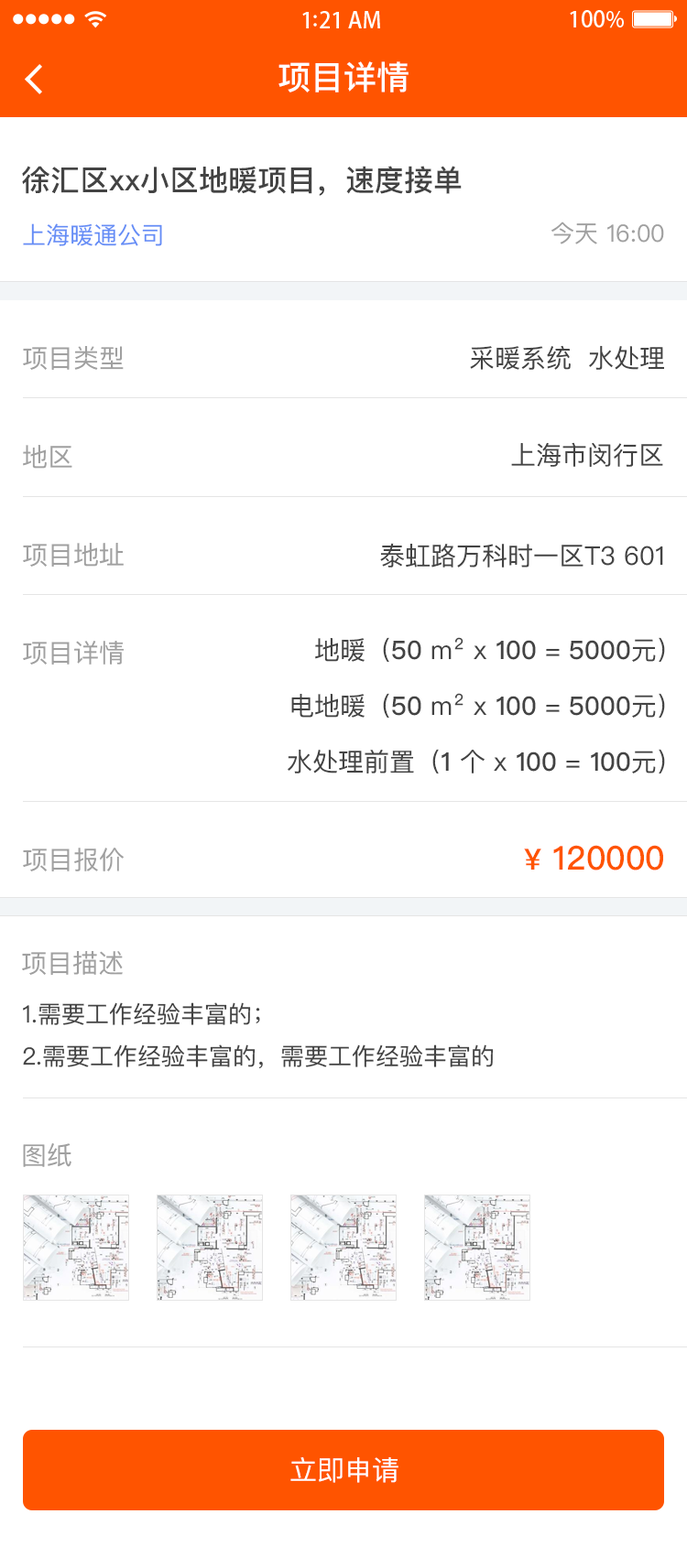
<style>
.page{position:relative;width:687px;height:1568px;background:#ffffff}
.page>*{position:absolute;margin:0}
.t1{font:33px "PingFangSC-Medium";color:#ffffff}
.t2{font:29.3px "PingFangSC-Medium";color:#434343}
.t3{font:23.8px "PingFangSC-Regular";color:#a0a0a0}
.t4{font:23.8px "PingFangSC-Regular";color:#648df6}
.t5{font:25.6px "PingFangSC-Regular";color:#a0a0a0}
.t6{font:25.6px "PingFangSC-Regular";color:#434343}
.t7{font:25.6px/59.5px "PingFangSC-Regular";color:#434343}
.t8{font:25.6px/59.5px "PingFangSC-Medium";color:#434343}
.t9{font:33px "PingFangSC-Medium";color:#ff5400}
.t10{font:29.3px "PingFangSC-Medium";color:#ff5400}
.t11{font:23.8px/45.8px "PingFangSC-Regular";color:#434343}
.t12{font:27.5px "PingFangSC-Regular";color:#ffffff;text-transform:uppercase}
</style>
<div class="page">
<p class="t1" style="left:278px;top:61px;width:130px;height:31px">项目详情</p>
<p class="t2" style="left:22px;top:166px;width:439px;height:30px">徐汇区xx小区地暖项目，速度接单</p>
<p class="t3" style="left:551px;top:222px;width:113px;height:22px">今天 16:00</p>
<p class="t4" style="left:23px;top:223px;width:139px;height:23px">上海暖通公司</p>
<p class="t5" style="left:23px;top:346px;width:101px;height:24px">项目类型</p>
<p class="t6" style="left:470px;top:345px;width:194px;height:25px">采暖系统  水处理</p>
<p class="t5" style="left:23px;top:445px;width:49px;height:24px">地区</p>
<p class="t6" style="left:511px;top:442px;width:152px;height:25px">上海市闵行区</p>
<p class="t5" style="left:23px;top:543px;width:101px;height:24px">项目地址</p>
<p class="t6" style="left:380px;top:543px;width:283px;height:25px">泰虹路万科时一区T3 601</p>
<p class="t5" style="left:23px;top:641px;width:101px;height:24px">项目详情</p>
<p class="t7" style="left:287px;top:637px;width:378px;height:137px;text-align:right">地暖（<span class="t8">50 </span>m² x <span class="t8">100 </span>= <span class="t8">5000</span>元）<br>电地暖（<span class="t8">50 </span>m² x <span class="t8">100 </span>= <span class="t8">5000</span>元）<br>水处理前置（<span class="t8">1 </span>个 x <span class="t8">100 </span>= <span class="t8">100</span>元）</p>
<p class="t9" style="left:524px;top:845px;width:139px;height:26px"><span class="t10">¥</span> 120000</p>
<p class="t5" style="left:23px;top:848px;width:101px;height:23px">项目报价</p>
<p class="t5" style="left:22px;top:951px;width:101px;height:24px">项目描述</p>
<p class="t11" style="left:23px;top:1002px;width:470px;height:67px">1.需要工作经验丰富的；<br>2.需要工作经验丰富的，需要工作经验丰富的</p>
<p class="t5" style="left:23px;top:1143px;width:48px;height:24px">图纸</p>
<p class="t12" style="left:290px;top:1457px;width:108px;height:26px">立即申请</p>
</div>
